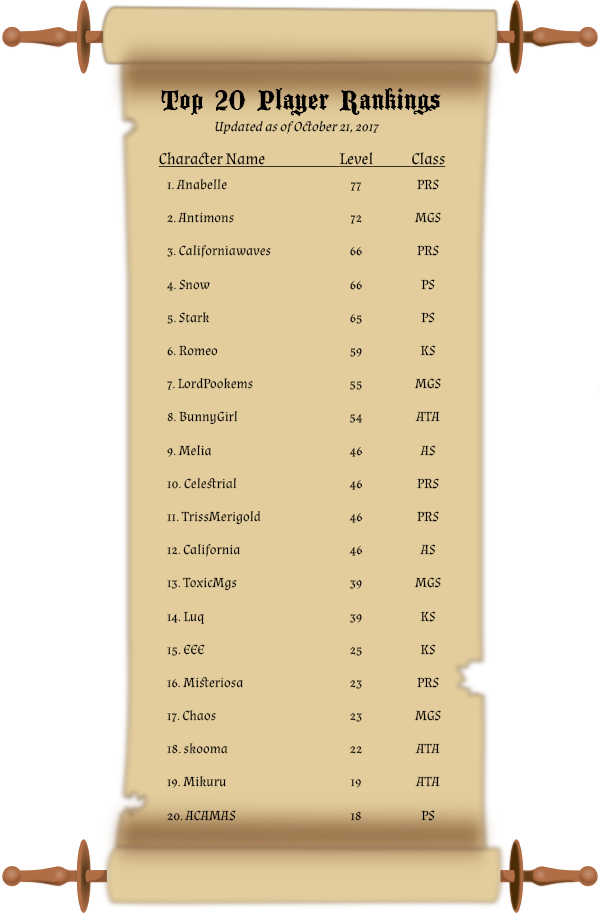
<style>
.page{position:relative;width:600px;height:915px;background:#e3cd9d}
.page>*{position:absolute;margin:0}
.t1{font:30px "BlackwoodCastle";color:#000000}
.t2{font:13.8px "Almendra-Regular";color:#000000;font-style:italic}
.t3{font:16.1px "Almendra-Regular";color:#000000;text-decoration:underline}
.t4{font:13.8px "Almendra-Regular";color:#000000}
</style>
<div class="page">
<p class="t1" style="left:161px;top:88px;width:280px;height:28px">Top 20 Player Rankings</p>
<p class="t2" style="left:215px;top:120px;width:165px;height:14px">Updated as of October 21, 2017</p>
<p class="t3" style="left:158px;top:151px;width:288px;height:16px">Class  Level   Character Name</p>
<p class="t4" style="left:167px;top:178px;width:104px;height:643px;text-align:right">1. Anabelle<br><br>2. Antimons<br><br>3. Californiawaves<br><br>4. Snow<br><br>5. Stark<br><br>6. Romeo<br><br>7. LordPookems<br><br>8. BunnyGirl<br><br>9. Melia<br><br>10. Celestrial<br><br>11. TrissMerigold<br><br>12. California<br><br>13. ToxicMgs<br><br>14. Luq<br><br>15. EEE<br><br>16. Misteriosa<br><br>17. Chaos<br><br>18. skooma<br><br>19. Mikuru<br><br>20. ACAMAS</p>
<p class="t4" style="left:349px;top:182px;width:14px;height:639px;text-align:center">77<br><br>72<br><br>66<br><br>66<br><br>65<br><br>59<br><br>55<br><br>54<br><br>46<br><br>46<br><br>46<br><br>46<br><br>39<br><br>39<br><br>25<br><br>23<br><br>23<br><br>22<br><br>19<br><br>18</p>
<p class="t4" style="left:414px;top:179px;width:27px;height:642px;text-align:center">PRS<br><br>MGS<br><br>PRS<br><br>PS<br><br>PS<br><br>KS<br><br>MGS<br><br>ATA<br><br>AS<br><br>PRS<br><br>PRS<br><br>AS<br><br>MGS<br><br>KS<br><br>KS<br><br>PRS<br><br>MGS<br><br>ATA<br><br>ATA<br><br>PS</p>
</div>
